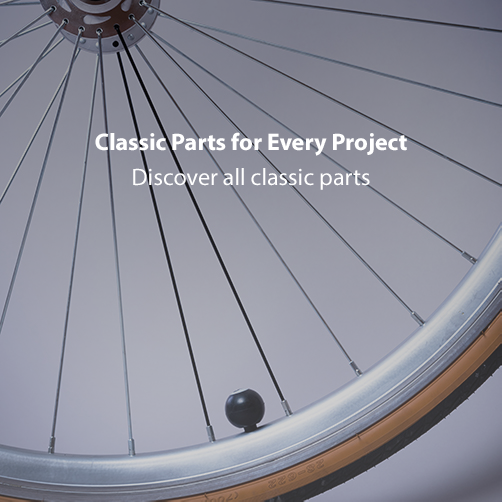
<style>
.page{position:relative;width:502px;height:502px}
.page>*{position:absolute;margin:0}
.t1{font:24px "MyriadPro-Bold";color:#ffffff}
.t2{font:24px "MyriadPro-Regular";color:#ffffff}
</style>
<div class="page">
<p class="t1" style="left:95px;top:132px;width:312px;height:24px">Classic Parts for Every Project</p>
<p class="t2" style="left:133px;top:168px;width:237px;height:22px">Discover all classic parts</p>
</div>
